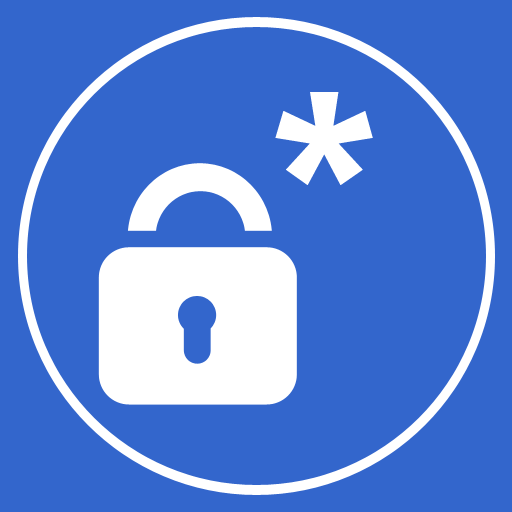
<style>
.page{position:relative;width:512px;height:512px;background:#3366cc}
.page>*{position:absolute;margin:0}
.t1{font:256px "StoneSansITC-Bold";color:#ffffff}
</style>
<div class="page">
<p class="t1" style="left:275px;top:92px;width:98px;height:93px">*</p>
</div>
